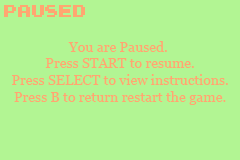
<style>
.page{position:relative;width:240px;height:160px;background:#b2f593}
.page>*{position:absolute;margin:0}
.t1{font:14px "Georgia";color:#ffa671}
</style>
<div class="page">
<p class="t1" style="left:12px;top:41px;width:216px;height:64px;text-align:center">You are Paused. <br>Press START to resume.<br>Press SELECT to view instructions.<br>Press B to return restart the game.</p>
</div>
